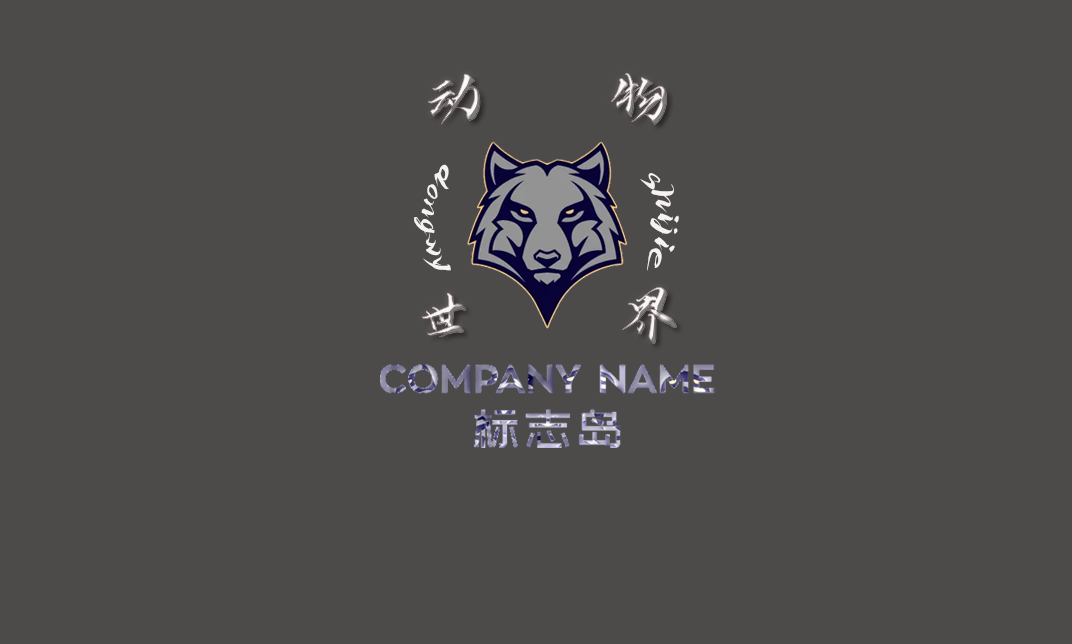
<style>
.page{position:relative;width:1072px;height:644px;background:#4d4a4a}
.page>*{position:absolute;margin:0}
.t1{font:60px "iSlideyunyouti-iFontslianming"}
.t2{font:24px "iSlideyunyouti-iFontslianming";color:#f7f2f2}
.t3{font:30px "iSlideyunyouti-iFontslianming";color:#f7f2f2}
</style>
<div class="page">
<p class="t1" style="left:422px;top:73px;width:255px;height:271px;text-align:center">动                物<br><br><br>世        界</p>
<p class="t2" style="left:414px;top:164px;width:37px;height:107px;text-align:center">dongwy</p>
<p class="t3" style="left:640px;top:173px;width:39px;height:98px;text-align:center">shijie</p>
</div>
